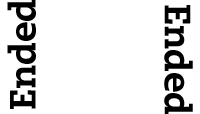
<style>
.page{position:relative;width:200px;height:114px;background:#ffffff}
.page>*{position:absolute;margin:0}
.t1{font:36px "MonologueBlackSSiBlack";color:#000000}
</style>
<div class="page">
<p class="t1" style="left:7px;top:0px;width:29px;height:109px;rotate:-90deg">Ended</p>
<p class="t1" style="left:164px;top:5px;width:29px;height:109px;rotate:90deg">Ended</p>
</div>
